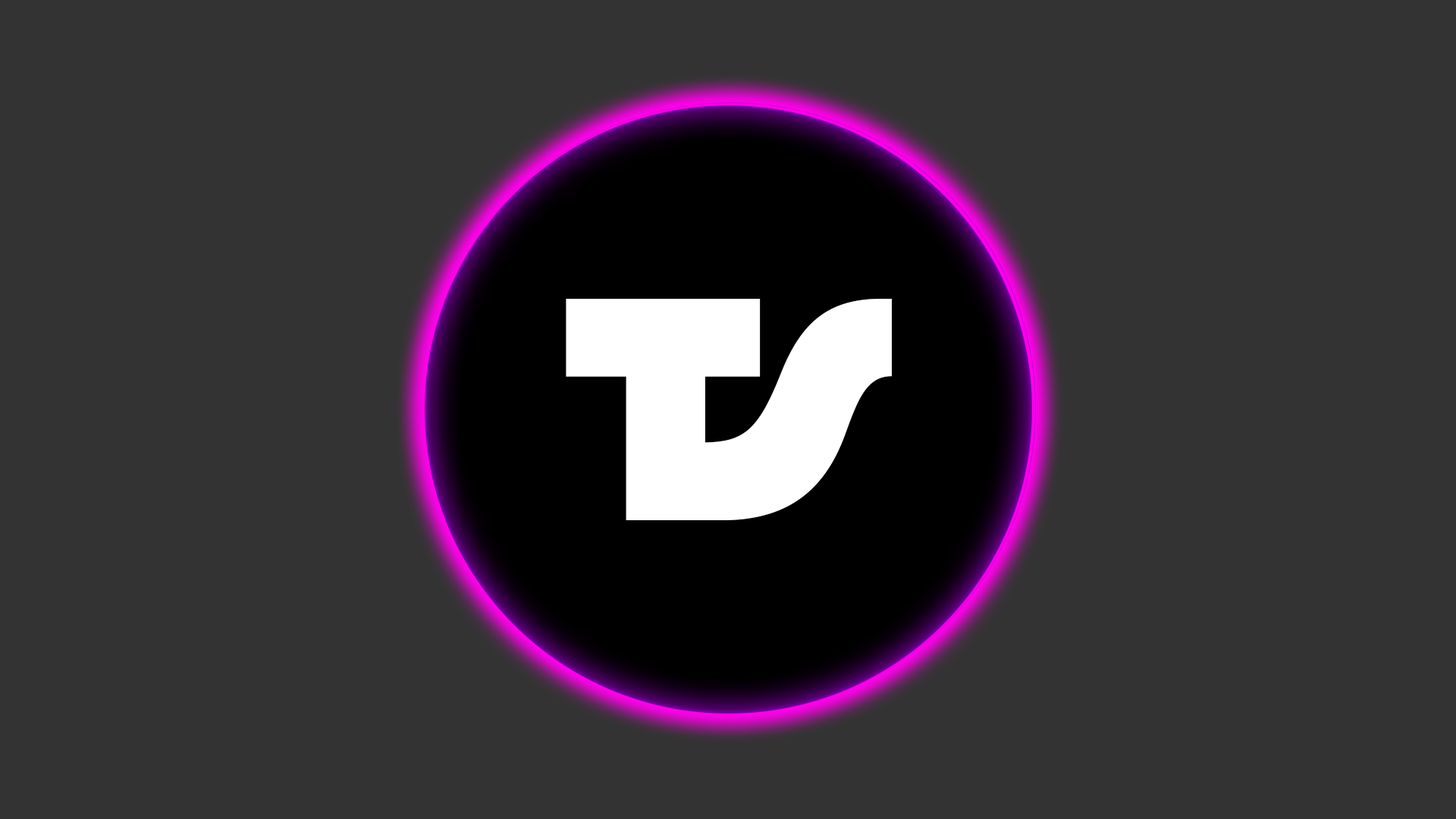
<style>
.page{position:relative;width:1456px;height:819px;background:#333333}
.page>*{position:absolute;margin:0}
.t1{font:316px "Flegrei-Regular";color:#ffffff}
</style>
<div class="page">
<p class="t1" style="left:566px;top:299px;width:195px;height:221px">T</p>
<p class="t1" style="left:701px;top:299px;width:191px;height:221px">S</p>
</div>
